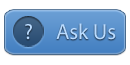
<style>
.page{position:relative;width:130px;height:65px;background:#ffffff}
.page>*{position:absolute;margin:0}
.t1{font:22px "MyriadPro-Regular";color:#b9dbff}
</style>
<div class="page">
<p class="t1" style="left:25px;top:24px;width:7px;height:16px">?</p>
<p class="t1" style="left:56px;top:23px;width:60px;height:17px">Ask Us</p>
</div>
